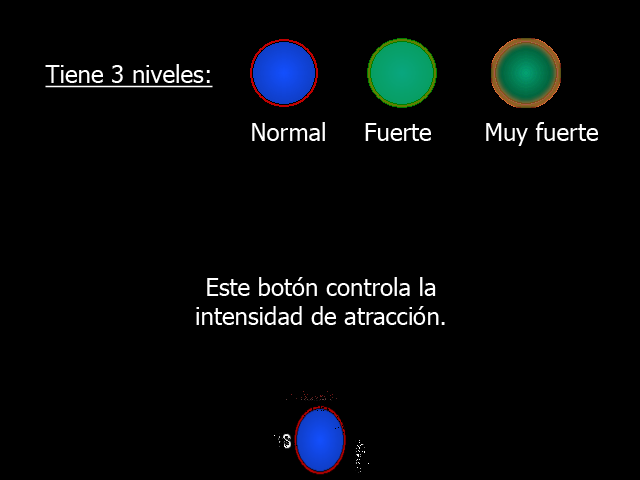
<style>
.page{position:relative;width:640px;height:480px;background:#000000}
.page>*{position:absolute;margin:0}
.t1{font:24px "Tahoma";color:#ffffff}
.t2{font:24px "Tahoma";color:#ffffff;text-decoration:underline}
</style>
<div class="page">
<p class="t1" style="left:45px;top:64px;width:553px;height:82px;text-align:center"><span class="t2">Tiene 3 niveles:<br></span><br>                                      Normal     Fuerte       Muy fuerte</p>
<p class="t1" style="left:196px;top:277px;width:249px;height:48px;text-align:center">Este botón controla la<br>intensidad de atracción.</p>
</div>
